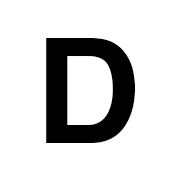
<style>
.page{position:relative;width:180px;height:180px;background:#ffffff}
.page>*{position:absolute;margin:0}
.t1{font:146.1px "Helvetica-Bold";color:#000000}
</style>
<div class="page">
<p class="t1" style="left:46px;top:38px;width:90px;height:105px">D</p>
</div>
